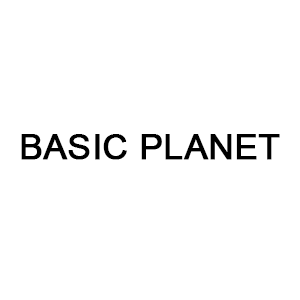
<style>
.page{position:relative;width:300px;height:300px;background:#ffffff}
.page>*{position:absolute;margin:0}
.t1{font:34.7px "ArialMT";color:#000000;font-weight:bold}
</style>
<div class="page">
<p class="t1" style="left:21px;top:134px;width:259px;height:26px">BASIC PLANET</p>
</div>
